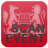
<style>
.page{position:relative;width:48px;height:48px}
.page>*{position:absolute;margin:0}
.t1{font:11px/10px "Arial-BoldMT";letter-spacing:0.03em;color:#333333;text-transform:uppercase;font-weight:bold}
</style>
<div class="page">
<p class="t1" style="left:5px;top:24px;width:40px;height:19px;text-align:right">SCAN<br>EVENT</p>
</div>
